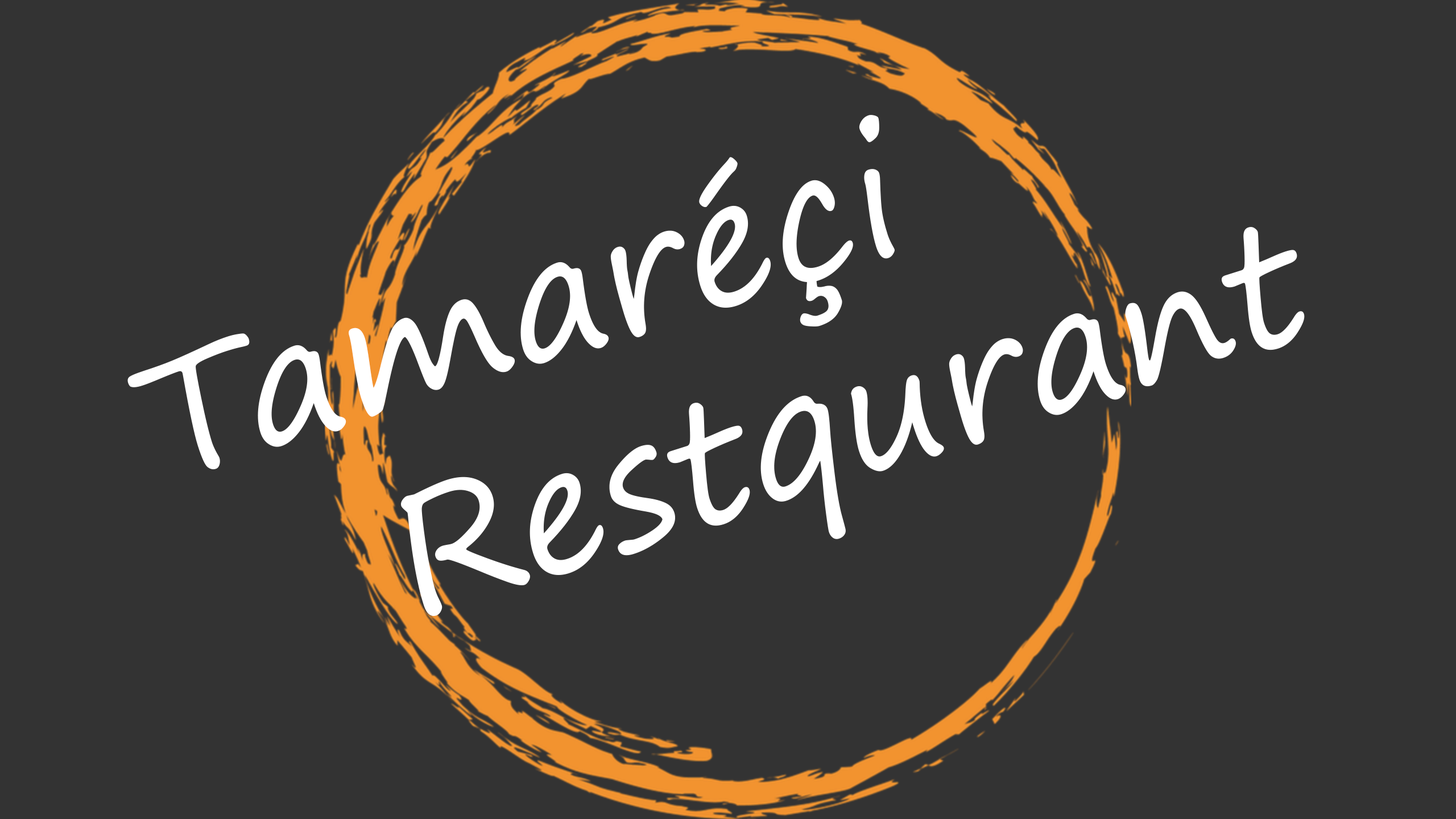
<style>
.page{position:relative;width:1456px;height:819px;background:#333333}
.page>*{position:absolute;margin:0}
.t1{font:170.6px "SegoePrint";color:#ffffff}
</style>
<div class="page">
<p class="t1" style="left:127px;top:115px;width:1178px;height:501px;rotate:-18deg">Tamaréçi<br>   Restqurant</p>
</div>
